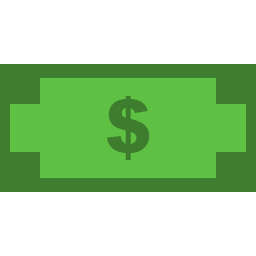
<style>
.page{position:relative;width:256px;height:256px;background:#ffffff}
.page>*{position:absolute;margin:0}
.t1{font:72px "Arial-Black";letter-spacing:-0.04em;color:#3f7d2e;scale:0.97 1}
</style>
<div class="page">
<p class="t1" style="left:106px;top:96px;width:44px;height:64px">$</p>
</div>
